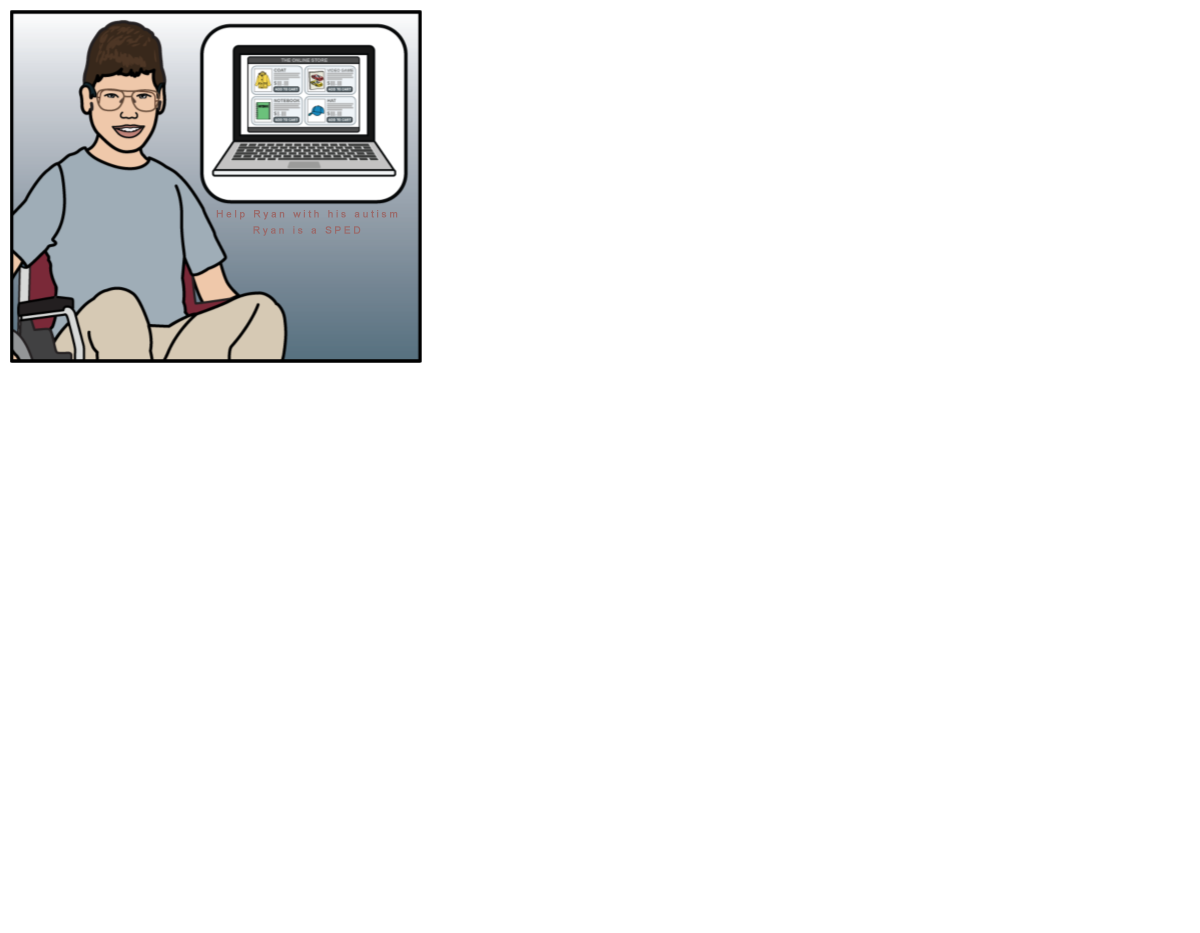
<style>
.page{position:relative;width:1200px;height:933px;background:#ffffff}
.page>*{position:absolute;margin:0}
.t1{font:10px "ArialMT";letter-spacing:0.25em;color:#996b6b;font-weight:bold}
</style>
<div class="page">
<p class="t1" style="left:216px;top:210px;width:182px;height:10px">Help Ryan with his autism</p>
<p class="t1" style="left:253px;top:226px;width:108px;height:10px">Ryan is a SPED</p>
</div>
